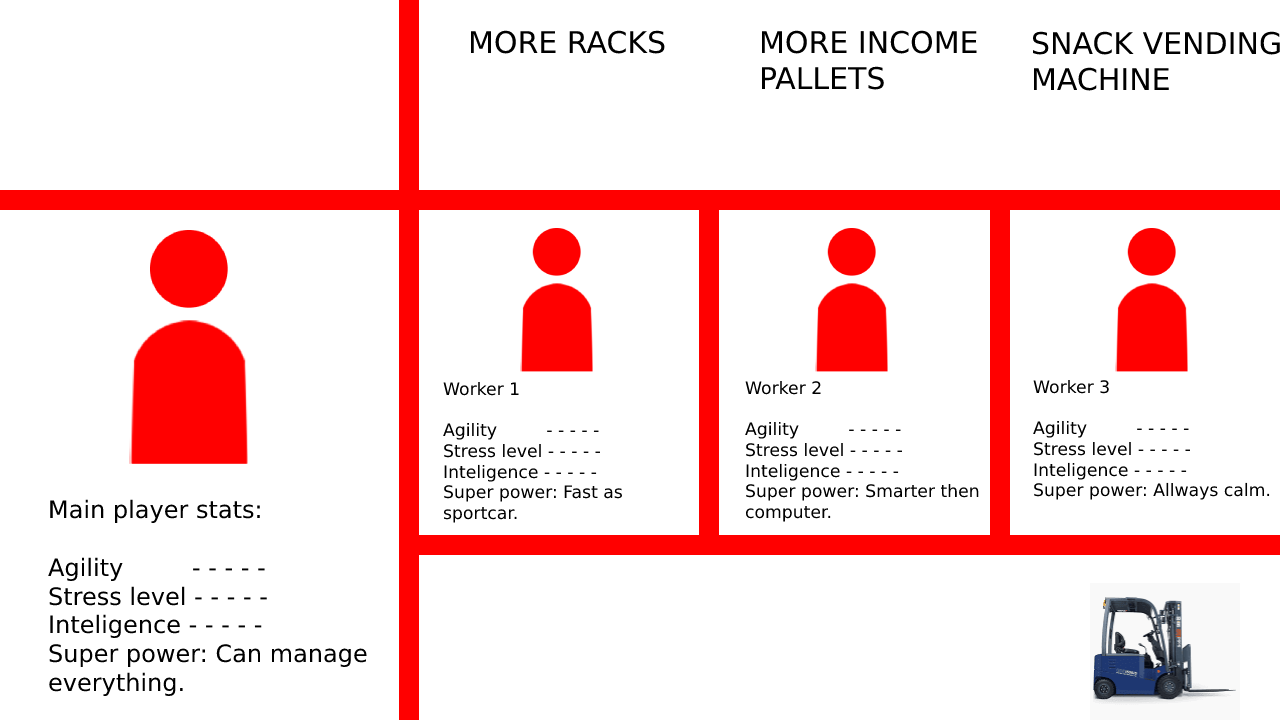
<style>
.page{position:relative;width:1280px;height:720px;background:#ffffff}
.page>*{position:absolute;margin:0}
.t1{font:30px "DejaVuSans";color:#000000}
.t2{font:17.2px "DejaVuSans";color:#000000}
.t3{font:24px "DejaVuSans";color:#000000}
</style>
<div class="page">
<p class="t1" style="left:470px;top:30px;width:195px;height:24px">MORE RACKS</p>
<p class="t1" style="left:761px;top:30px;width:216px;height:60px">MORE INCOME PALLETS</p>
<p class="t1" style="left:1032px;top:31px;width:248px;height:60px">SNACK VENDING<br>MACHINE</p>
<p class="t2" style="left:443px;top:381px;width:179px;height:142px">Worker 1<br><br>Agility         - - - - -<br>Stress level - - - - -<br>Inteligence - - - - - <br>Super power: Fast as sportcar.</p>
<p class="t2" style="left:745px;top:380px;width:234px;height:142px">Worker 2<br><br>Agility         - - - - -<br>Stress level - - - - -<br>Inteligence - - - - - <br>Super power: Smarter then computer.</p>
<p class="t2" style="left:1033px;top:379px;width:237px;height:121px">Worker 3<br><br>Agility         - - - - -<br>Stress level - - - - -<br>Inteligence - - - - - <br>Super power: Allways calm.</p>
<p class="t3" style="left:48px;top:499px;width:319px;height:197px">Main player stats:<br><br>Agility         - - - - -<br>Stress level - - - - -<br>Inteligence - - - - - <br>Super power: Can manage everything.</p>
</div>
